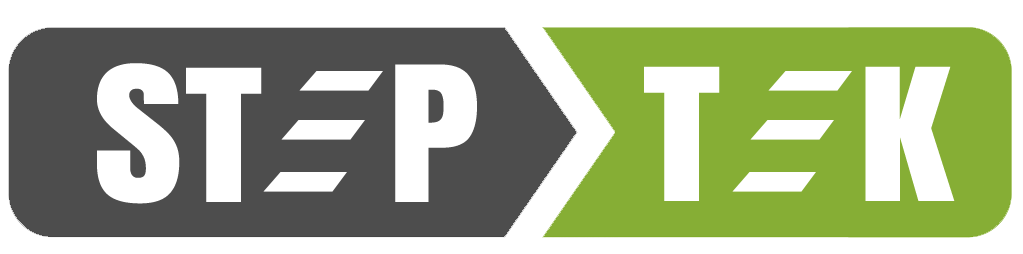
<style>
.page{position:relative;width:1023px;height:254px;background:#ffffff}
.page>*{position:absolute;margin:0}
.t1{font:160px "Anton-Regular";letter-spacing:-0.05em;color:#ffffff;text-transform:uppercase;scale:1.22 1}
.t2{font:156.2px "Anton-Regular";letter-spacing:-0.05em;color:#ffffff;text-transform:uppercase;scale:1.28 1}
</style>
<div class="page">
<p class="t1" style="left:97px;top:63px;width:380px;height:141px">s      p</p>
<p class="t2" style="left:186px;top:67px;width:76px;height:135px">t</p>
<p class="t2" style="left:644px;top:66px;width:311px;height:135px">t    k</p>
</div>
